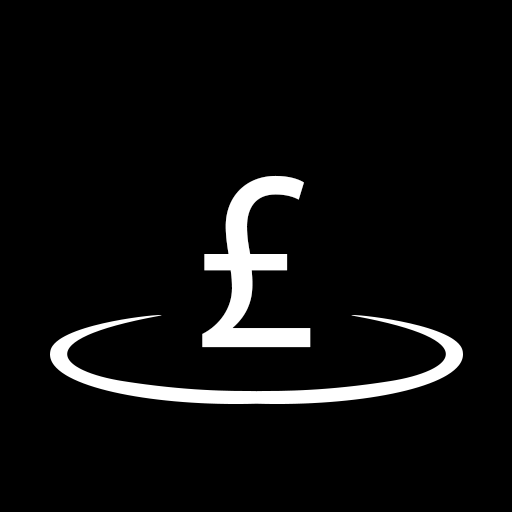
<style>
.page{position:relative;width:512px;height:512px;background:#000000}
.page>*{position:absolute;margin:0}
.t1{font:259.2px "MyriadPro-Regular";color:#ffffff}
</style>
<div class="page">
<p class="t1" style="left:202px;top:175px;width:109px;height:173px">£</p>
</div>
